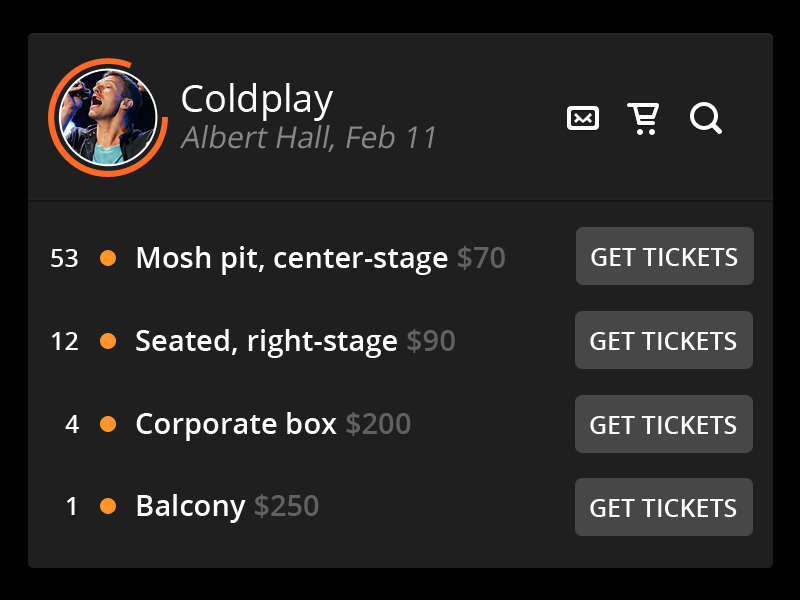
<style>
.page{position:relative;width:800px;height:600px;background:#1f1f1f}
.page>*{position:absolute;margin:0}
.t1{font:30.3px "OpenSans";color:#888888;font-style:italic}
.t2{font:37.9px "OpenSans";color:#ffffff}
.t3{font:29.2px "OpenSans-Semibold";color:#ffffff}
.t4{font:29.2px "OpenSans-Semibold";color:#616161}
.t5{font:25px "OpenSans-Semibold";color:#ffffff;text-transform:uppercase}
</style>
<div class="page">
<p class="t1" style="left:180px;top:83px;width:255px;height:69px"><span class="t2">Coldplay<br></span>Albert Hall, Feb 11</p>
<p class="t3" style="left:137px;top:246px;width:368px;height:29px">Mosh pit, center-stage <span class="t4">$70</span></p>
<p class="t5" style="left:51px;top:249px;width:27px;height:18px">53</p>
<p class="t5" style="left:591px;top:248px;width:147px;height:18px">Get Tickets</p>
<p class="t3" style="left:136px;top:329px;width:319px;height:29px">Seated, right-stage <span class="t4">$90</span></p>
<p class="t5" style="left:51px;top:332px;width:27px;height:18px">12</p>
<p class="t5" style="left:590px;top:332px;width:147px;height:18px">Get Tickets</p>
<p class="t3" style="left:136px;top:412px;width:275px;height:29px">Corporate box <span class="t4">$200</span></p>
<p class="t5" style="left:65px;top:415px;width:14px;height:18px">4</p>
<p class="t5" style="left:590px;top:416px;width:147px;height:18px">Get Tickets</p>
<p class="t5" style="left:66px;top:497px;width:9px;height:18px">1</p>
<p class="t3" style="left:137px;top:494px;width:182px;height:29px">Balcony <span class="t4">$250</span></p>
<p class="t5" style="left:590px;top:499px;width:147px;height:18px">Get Tickets</p>
</div>
